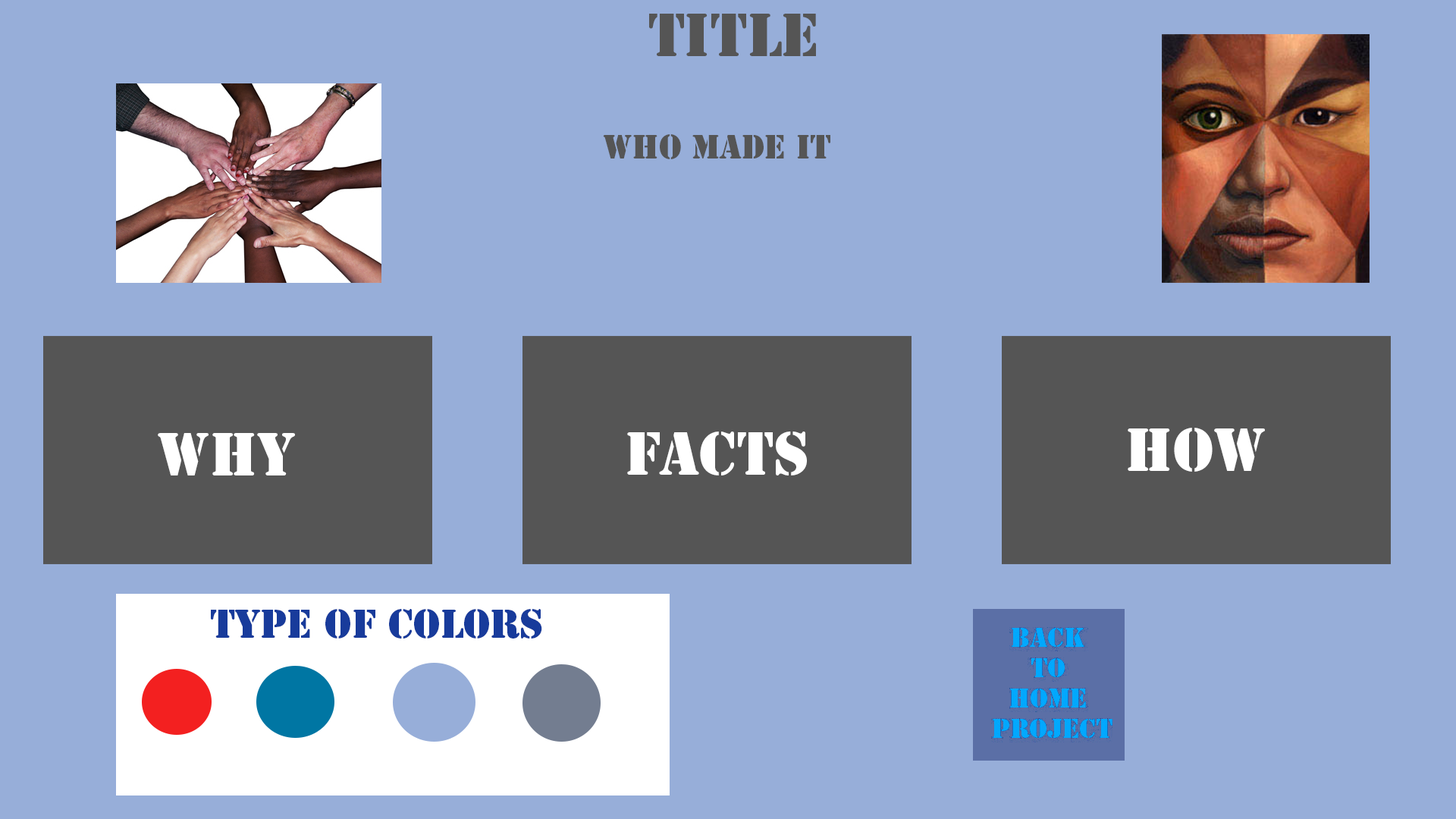
<style>
.page{position:relative;width:1456px;height:819px;background:#97aed9}
.page>*{position:absolute;margin:0}
.t1{font:56.9px "StencilStd";color:#555555}
.t2{font:31.6px "StencilStd";color:#555555}
.t3{font:56.9px "StencilStd";color:#ffffff}
.t4{font:37.9px "StencilStd";color:#183b9b}
</style>
<div class="page">
<p class="t1" style="left:649px;top:14px;width:167px;height:42px">Title</p>
<p class="t2" style="left:603px;top:134px;width:227px;height:25px">Who made it</p>
<p class="t3" style="left:158px;top:433px;width:137px;height:42px">Why</p>
<p class="t3" style="left:627px;top:431px;width:180px;height:44px">Facts</p>
<p class="t3" style="left:1128px;top:428px;width:137px;height:44px">How</p>
<p class="t4" style="left:211px;top:609px;width:331px;height:30px">Type of colors</p>
</div>
